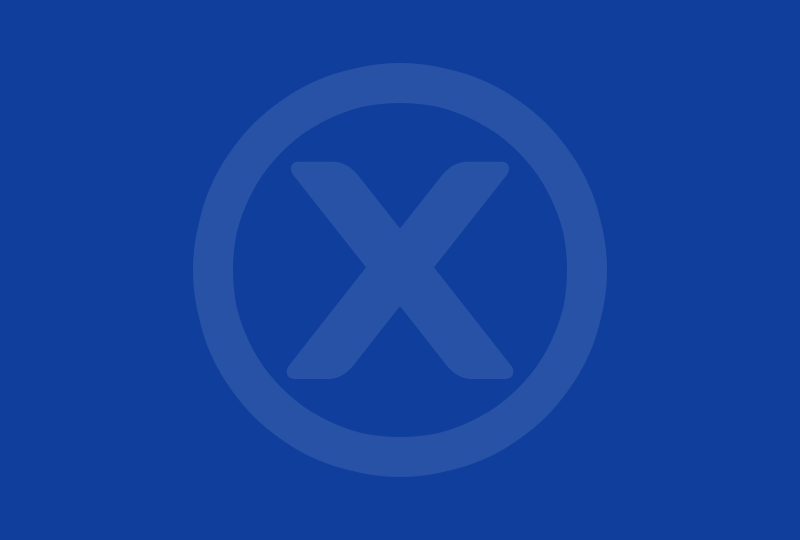
<style>
.page{position:relative;width:800px;height:540px;background:#103e9c}
.page>*{position:absolute;margin:0}
.t1{font:310px "DaysOne-Regular";color:#2852a6}
</style>
<div class="page">
<p class="t1" style="left:286px;top:161px;width:228px;height:218px">X</p>
</div>
